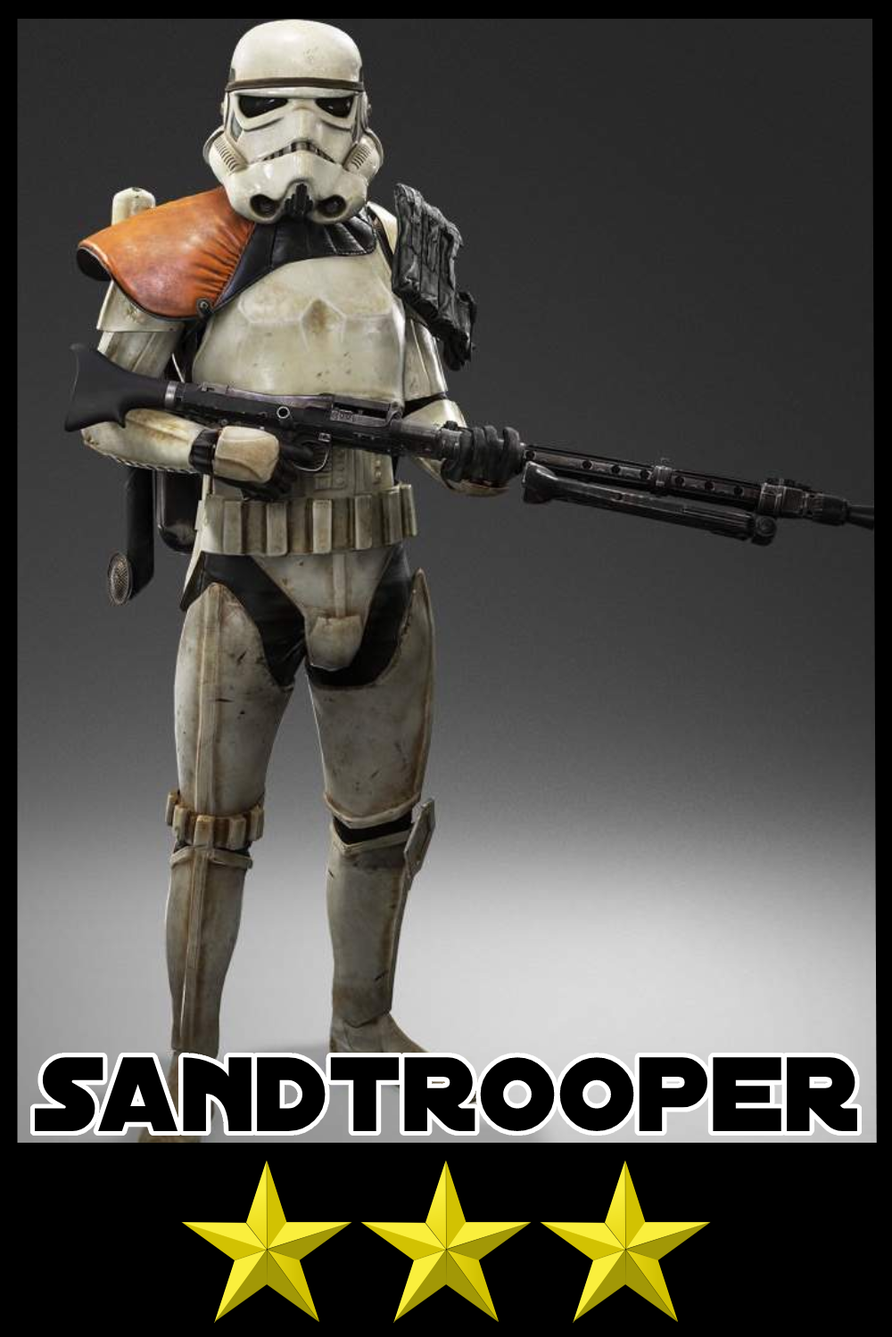
<style>
.page{position:relative;width:892px;height:1337px}
.page>*{position:absolute;margin:0}
.t1{font:113.4px "DistantGalaxy";color:#000000}
</style>
<div class="page">
<p class="t1" style="left:35px;top:1057px;width:822px;height:74px">sandtrooper</p>
</div>
